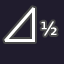
<style>
.page{position:relative;width:64px;height:64px;background:#201c2d}
.page>*{position:absolute;margin:0}
.t1{font:18px "OpenDyslexic-Regular";color:#ffffff}
</style>
<div class="page">
<p class="t1" style="left:41px;top:21px;width:16px;height:15px">½</p>
</div>
